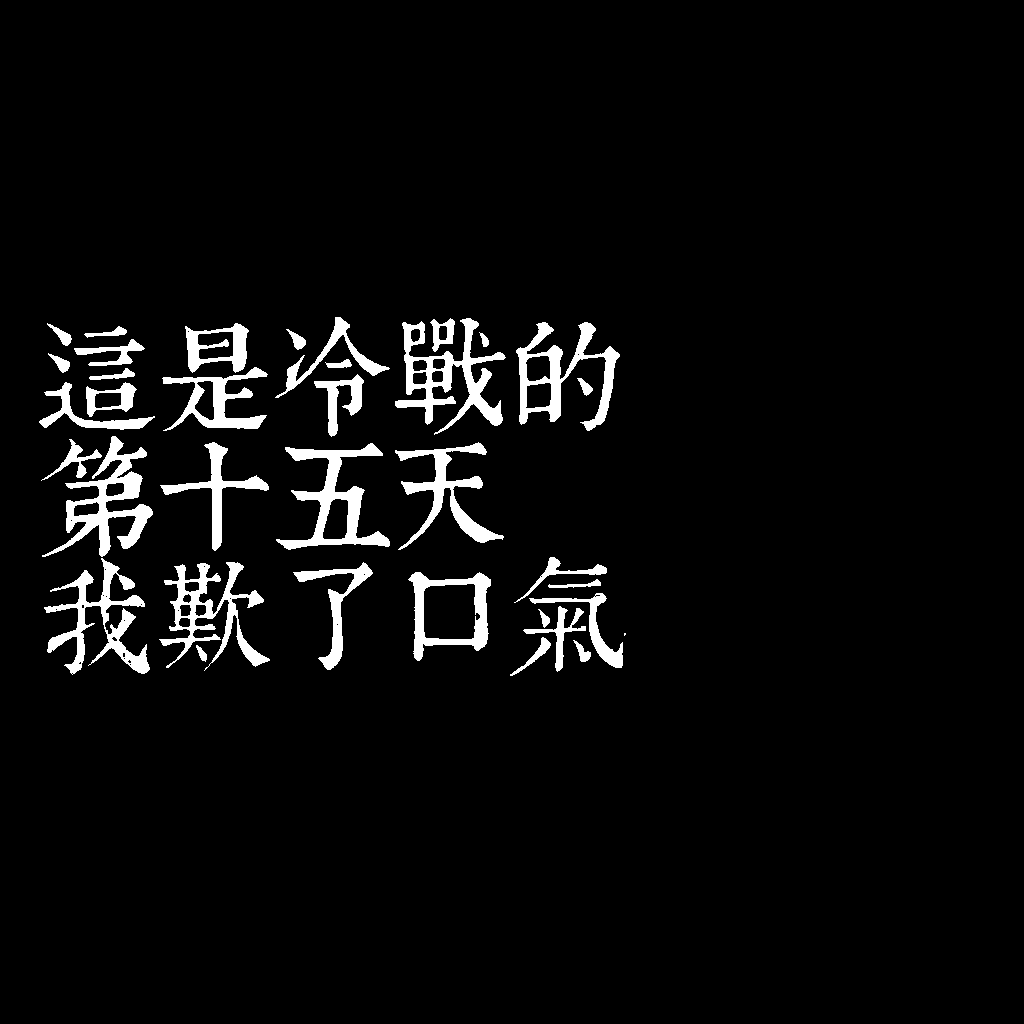
<style>
.page{position:relative;width:1024px;height:1024px;background:#000000}
.page>*{position:absolute;margin:0}
.t1{font:120px/120px "TpldKhangXiDictTrial";letter-spacing:-0.02em;color:#ffffff}
</style>
<div class="page">
<p class="t1" style="left:39px;top:317px;width:587px;height:359px">這是冷戰的<br>第十五天<br>我歎了口氣</p>
</div>
